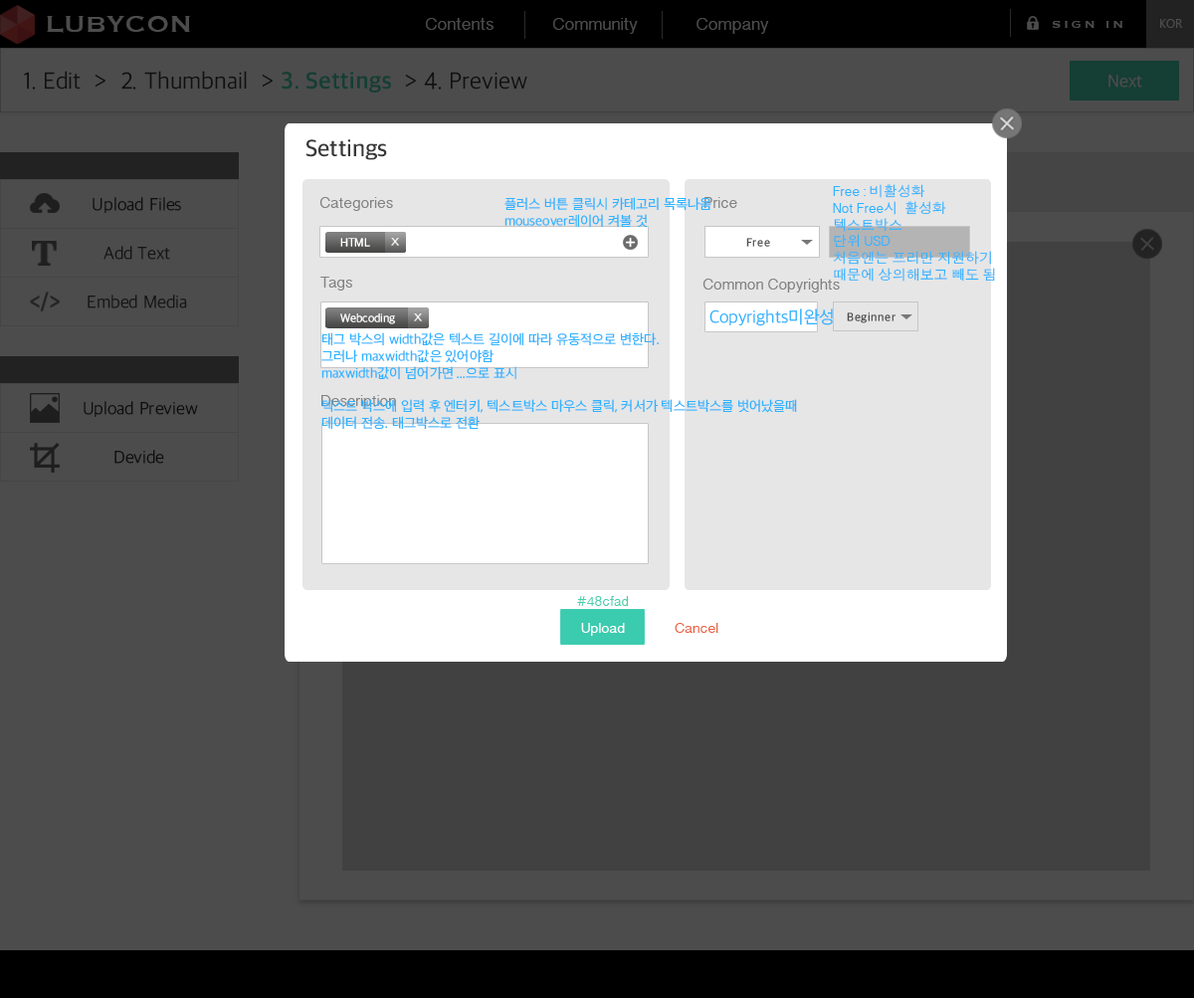
<style>
.page{position:relative;width:1194px;height:999px;background:#4c4c4c}
.page>*{position:absolute;margin:0}
.t1{font:29.8px "Copperplate";color:#4c4c4c}
.t2{font:17.9px "TamilSangamMN";color:#4c4c4c}
.t3{font:13.9px "Copperplate";letter-spacing:0.2em;color:#4c4c4c}
.t4{font:11.9px "LaoUI";color:#4c4c4c}
.t5{font:23.9px "AppleSDGothicNeo-Light"}
.t6{font:23.9px "AppleSDGothicNeo-Bold"}
.t7{font:17.9px "AppleSDGothicNeo-Light";color:#4c4c4c}
.t8{font:23.9px "AppleSDGothicNeo-SemiBold";color:#383838}
.t9{font:13.9px "AppleGothic";color:#2fb3ff}
.t10{font:13.9px "TamilSangamMN";color:#2fb3ff}
.t11{font:17.9px "AppleSDGothicNeo-Light";color:#0e0e0e}
.t12{font:15.9px "TamilSangamMN";color:#838282}
.t13{font:13.9px "AppleSDGothicNeo-Light";color:#2fb3ff}
.t14{font:17.9px "AppleSDGothicNeo-Light";color:#151515}
.t15{font:11.9px "AppleSDGothicNeo-Light";color:#ffffff}
.t16{font:11.9px "AppleSDGothicNeo-Regular";letter-spacing:0.05em;color:#4c4c4c}
.t17{font:17.9px "AppleSDGothicNeo-Light";color:#2fb3ff}
.t18{font:13.9px "TamilSangamMN";color:#48cfad}
.t19{font:14.9px "TamilSangamMN";color:#ffffff}
.t20{font:14.9px "TamilSangamMN";color:#ec6446}
</style>
<div class="page">
<p class="t1" style="left:47px;top:16px;width:143px;height:17px">LUBYCON</p>
<p class="t2" style="left:426px;top:18px;width:67px;height:12px">Contents</p>
<p class="t2" style="left:553px;top:18px;width:85px;height:16px">Community</p>
<p class="t2" style="left:696px;top:18px;width:73px;height:16px">Company</p>
<p class="t3" style="left:1053px;top:21px;width:69px;height:7px">SIGN IN</p>
<p class="t4" style="left:1160px;top:19px;width:23px;height:9px">KOR</p>
<p class="t5" style="left:24px;top:71px;width:503px;height:22px">1. Edit  &gt;  2. Thumbnail  &gt; <span class="t6">3. Settings</span>  &gt; 4. Preview</p>
<p class="t7" style="left:1108px;top:75px;width:34px;height:13px">Next</p>
<p class="t8" style="left:305px;top:139px;width:82px;height:21px">Settings</p>
<p class="t9" style="left:833px;top:184px;width:162px;height:98px"><span class="t10">Free : </span>비활성화<span class="t10"><br>Not Free</span>시  활성화<br>텍스트박스<br>단위<span class="t10"> USD<br></span>처음엔는 프리만 지원하기<br>때문에 상의해보고 빼도 됨</p>
<p class="t11" style="left:93px;top:197px;width:88px;height:16px">Upload Files</p>
<p class="t12" style="left:319px;top:197px;width:74px;height:14px">Categories</p>
<p class="t13" style="left:504px;top:197px;width:207px;height:30px">플러스 버튼 클릭시 카테고리 목록나옴<br>mouseover레이어 켜볼 것</p>
<p class="t12" style="left:704px;top:197px;width:33px;height:11px">Price</p>
<p class="t14" style="left:103px;top:246px;width:67px;height:14px">Add Text</p>
<p class="t15" style="left:340px;top:238px;width:30px;height:9px">HTML</p>
<p class="t16" style="left:746px;top:238px;width:24px;height:9px">Free</p>
<p class="t12" style="left:320px;top:277px;width:32px;height:13px">Tags</p>
<p class="t12" style="left:702px;top:279px;width:138px;height:13px">Common Copyrights</p>
<p class="t14" style="left:88px;top:294px;width:99px;height:14px">Embed Media</p>
<p class="t15" style="left:340px;top:313px;width:55px;height:11px">Webcoding</p>
<p class="t17" style="left:709px;top:308px;width:124px;height:18px">Copyrights미완성</p>
<p class="t16" style="left:847px;top:312px;width:48px;height:11px">Beginner</p>
<p class="t13" style="left:321px;top:332px;width:476px;height:97px">태그 박스의 width값은 텍스트 길이에 따라 유동적으로 변한다.<br>그러나 maxwidth값은 있어야함<br>maxwidth값이 넘어가면 ...으로 표시<br><br>텍스트 박스에 입력 후 엔터키, 텍스트박스 마우스 클릭, 커서가 텍스트박스를 벗어났을때<br>데이터 전송. 태그박스로 전환</p>
<p class="t11" style="left:84px;top:401px;width:114px;height:16px">Upload Preview</p>
<p class="t12" style="left:321px;top:395px;width:75px;height:14px">Description</p>
<p class="t11" style="left:114px;top:450px;width:50px;height:14px">Devide</p>
<p class="t18" style="left:577px;top:596px;width:52px;height:10px">#48cfad</p>
<p class="t19" style="left:581px;top:623px;width:44px;height:13px">Upload</p>
<p class="t20" style="left:675px;top:623px;width:43px;height:10px">Cancel</p>
</div>
